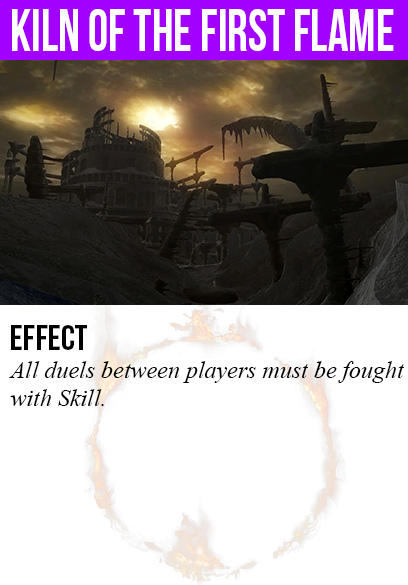
<style>
.page{position:relative;width:408px;height:585px;background:#ffffff}
.page>*{position:absolute;margin:0}
.t1{font:60px "BebasNeue";color:#ffffff;scale:0.85 1}
.t2{font:36px "BebasNeue";color:#000000}
.t3{font:24px "TimesNewRomanPS-ItalicMT";color:#000000}
</style>
<div class="page">
<p class="t1" style="left:12px;top:9px;width:382px;height:42px">kiln of the first flame</p>
<p class="t2" style="left:11px;top:325px;width:76px;height:25px">Effect</p>
<p class="t3" style="left:9px;top:361px;width:395px;height:45px">All duels between players must be fought<br>with Skill.</p>
</div>
